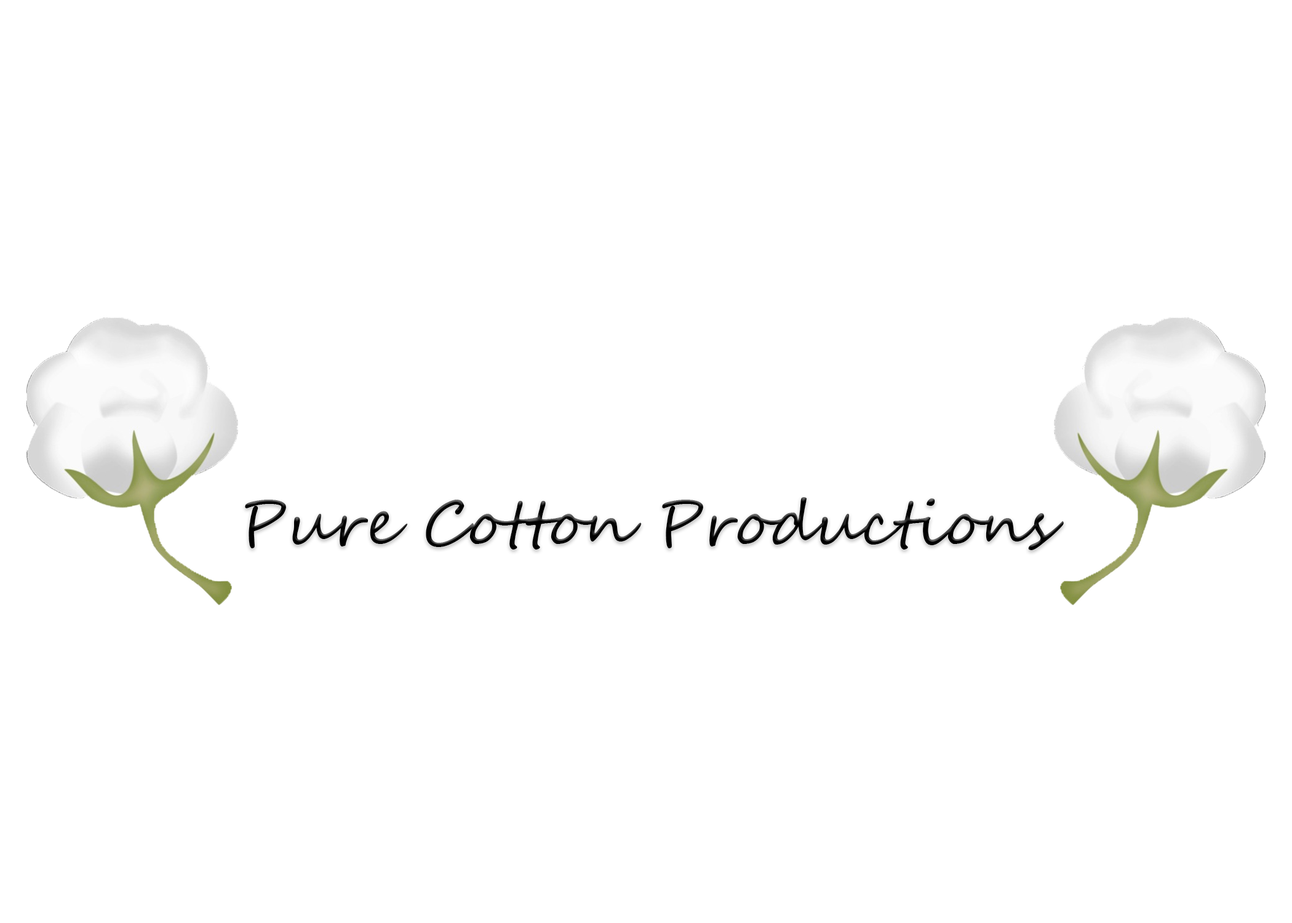
<style>
.page{position:relative;width:1292px;height:923px;background:#ffffff}
.page>*{position:absolute;margin:0}
.t1{font:61.5px "SegoeScript";color:#000000}
</style>
<div class="page">
<p class="t1" style="left:245px;top:497px;width:819px;height:53px">Pure Cotton Productions</p>
</div>
